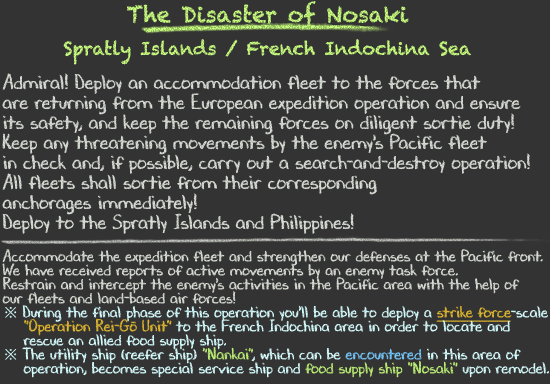
<style>
.page{position:relative;width:550px;height:384px;background:#333333}
.page>*{position:absolute;margin:0}
.t1{font:18px/36px "Chalkduster"}
.t2{font:22px/36px "Chalkduster"}
.t3{font:20px/20px "DJBChalkItUp";color:#d9ded6}
.t4{font:16px/14px "DJBChalkItUp";color:#d9ded6}
.t5{font:16px/14px "TimesNewRomanPSMT";color:#d7feff}
.t6{font:16px/14px "DJBChalkItUp";color:#d7feff}
.t7{font:16px/14px "DJBChalkItUp";color:#dfb731;text-decoration:underline}
.t8{font:16px/14px "DJBChalkItUp";color:#dfb731}
.t9{font:16px/14px "DJBChalkItUp";color:#bdef78}
.t10{font:16px/14px "DJBChalkItUp";color:#76c8fb}
</style>
<div class="page">
<p class="t1" style="left:63px;top:1px;width:408px;height:64px;text-align:center"><span class="t2">The Disaster of Nosaki<br></span>Spratly Islands / French Indochina Sea</p>
<p class="t3" style="left:2px;top:73px;width:547px;height:305px">Admiral! Deploy an accommodation fleet to the forces that<br>are returning from the European expedition operation and ensure<br>its safety, and keep the remaining forces on diligent sortie duty!<br>Keep any threatening movements by the enemy's Pacific fleet<br>in check and, if possible, carry out a search-and-destroy operation!<br>All fleets shall sortie from their corresponding<br>anchorages immediately!<br>Deploy to the Spratly Islands and Philippines!<br><br><span class="t4">Accommodate the expedition fleet and strengthen our defenses at the Pacific front.<br>We have received reports of active movements by an enemy task force.<br>Restrain and intercept the enemy's activities in the Pacific area with the help of<br>our fleets and land-based air forces!<br></span><span class="t5">※ </span><span class="t6">During the final phase of this operation you'll be able to deploy a </span><span class="t7">strike force</span><span class="t6">-scale<br>　 </span><span class="t8">"Operation Rei-Gō Unit"</span><span class="t6"> to the French Indochina area in order to locate and<br>　 rescue an allied food supply ship.<br></span><span class="t5">※ </span><span class="t6">The utility ship (reefer ship) </span><span class="t9">"Nankai"</span><span class="t6">, which can be </span><span class="t10">encountered</span><span class="t6"> in this area of<br>　 operation, becomes special service ship and </span><span class="t9">food supply ship "Nosaki"</span><span class="t6"> upon remodel.</span></p>
</div>
